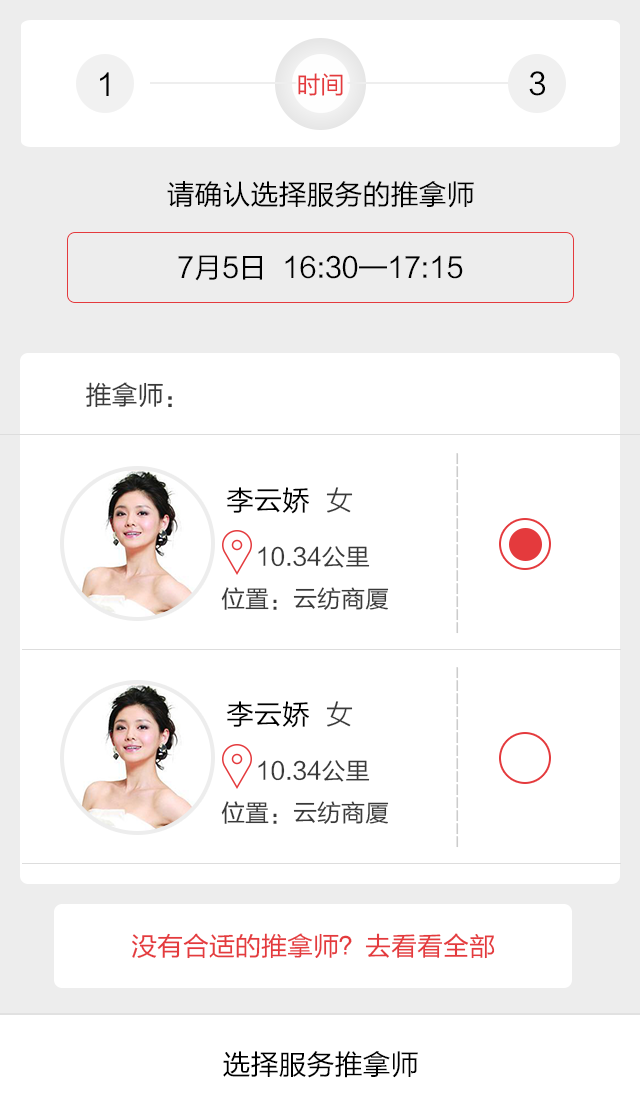
<style>
.page{position:relative;width:640px;height:1113px;background:#ffffff}
.page>*{position:absolute;margin:0}
.t1{font:30px "FZLTHJW--GB1-0";color:#000000}
.t2{font:24px "FZLTHJW--GB1-0";color:#e43a3d}
.t3{font:28px "FZLTHJW--GB1-0";color:#000000}
.t4{font:26px "FZLTHJW--GB1-0";color:#393939}
.t5{font:20px/50px "FZLTHJW--GB1-0";color:#bbbbbb}
.t6{font:28px "FZLTXHK";color:#393939}
.t7{font:24px "FZLTHJW--GB1-0";color:#393939}
.t8{font:26px "FZLTHJW--GB1-0";color:#e43a3d}
</style>
<div class="page">
<p class="t1" style="left:100px;top:72px;width:9px;height:24px">1</p>
<p class="t2" style="left:298px;top:73px;width:45px;height:23px">时间</p>
<p class="t1" style="left:529px;top:71px;width:16px;height:25px">3</p>
<p class="t3" style="left:167px;top:181px;width:307px;height:27px">请确认选择服务的推拿师</p>
<p class="t3" style="left:178px;top:255px;width:285px;height:26px">7月5日  16:30—17:15</p>
<p class="t4" style="left:86px;top:382px;width:86px;height:26px">推拿师：</p>
<p class="t5" style="left:456px;top:453px;width:3px;height:181px;opacity:0.77">--------------</p>
<p class="t3" style="left:226px;top:487px;width:127px;height:27px">李云娇  <span class="t6">女</span></p>
<p class="t7" style="left:258px;top:546px;width:112px;height:22px">10.34公里</p>
<p class="t7" style="left:221px;top:587px;width:168px;height:23px">位置：云纺商厦</p>
<p class="t5" style="left:456px;top:667px;width:3px;height:181px;opacity:0.77">--------------</p>
<p class="t3" style="left:226px;top:701px;width:127px;height:27px">李云娇  <span class="t6">女</span></p>
<p class="t7" style="left:258px;top:760px;width:112px;height:22px">10.34公里</p>
<p class="t7" style="left:221px;top:801px;width:168px;height:23px">位置：云纺商厦</p>
<p class="t8" style="left:132px;top:933px;width:363px;height:26px">没有合适的推拿师？去看看全部</p>
<p class="t3" style="left:223px;top:1051px;width:195px;height:27px">选择服务推拿师</p>
</div>
